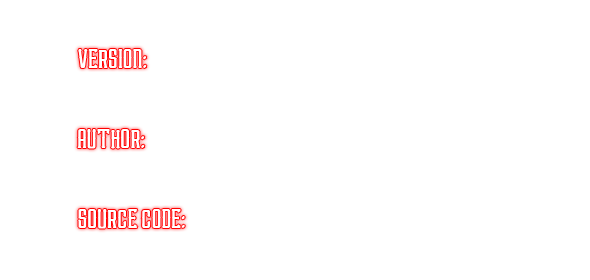
<style>
.page{position:relative;width:590px;height:280px;background:#ffffff}
.page>*{position:absolute;margin:0}
.t1{font:25px "TUVBenchmark";color:#ffffff}
</style>
<div class="page">
<p class="t1" style="left:78px;top:49px;width:69px;height:19px">Version:</p>
<p class="t1" style="left:77px;top:129px;width:68px;height:20px">Author:</p>
<p class="t1" style="left:78px;top:209px;width:107px;height:20px">Source code:</p>
</div>
